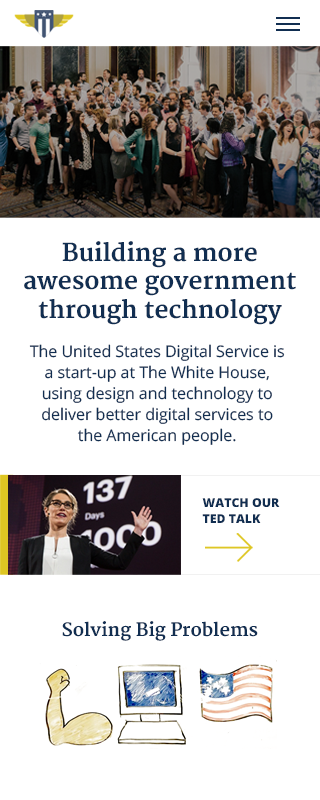
<style>
.page{position:relative;width:320px;height:800px;background:#ffffff}
.page>*{position:absolute;margin:0}
.t1{font:24px "Merriweather-Bold";color:#112e51}
.t2{font:16px/21px "OpenSans";color:#112e51}
.t3{font:12.3px/16.1px "OpenSans-Extrabold";color:#112e51;text-transform:uppercase}
.t4{font:18px "Merriweather-Bold";color:#112e51}
</style>
<div class="page">
<p class="t1" style="left:24px;top:241px;width:272px;height:84px;text-align:center">Building a more<br>awesome government through technology</p>
<p class="t2" style="left:29px;top:344px;width:256px;height:101px;text-align:center">The United States Digital Service is a start-up at The White House, using design and technology to <br>deliver better digital services to <br>the American people.</p>
<p class="t3" style="left:202px;top:498px;width:78px;height:25px">Watch our<br>ted talk</p>
<p class="t4" style="left:62px;top:621px;width:196px;height:20px">Solving Big Problems</p>
</div>
